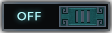
<style>
.page{position:relative;width:112px;height:33px;background:#090b0c}
.page>*{position:absolute;margin:0}
.t1{font:11.6px "Montserrat-Regular";letter-spacing:0.06em;color:#b5fbff;text-transform:uppercase}
</style>
<div class="page">
<p class="t1" style="left:17px;top:12px;width:24px;height:9px">Off</p>
</div>
